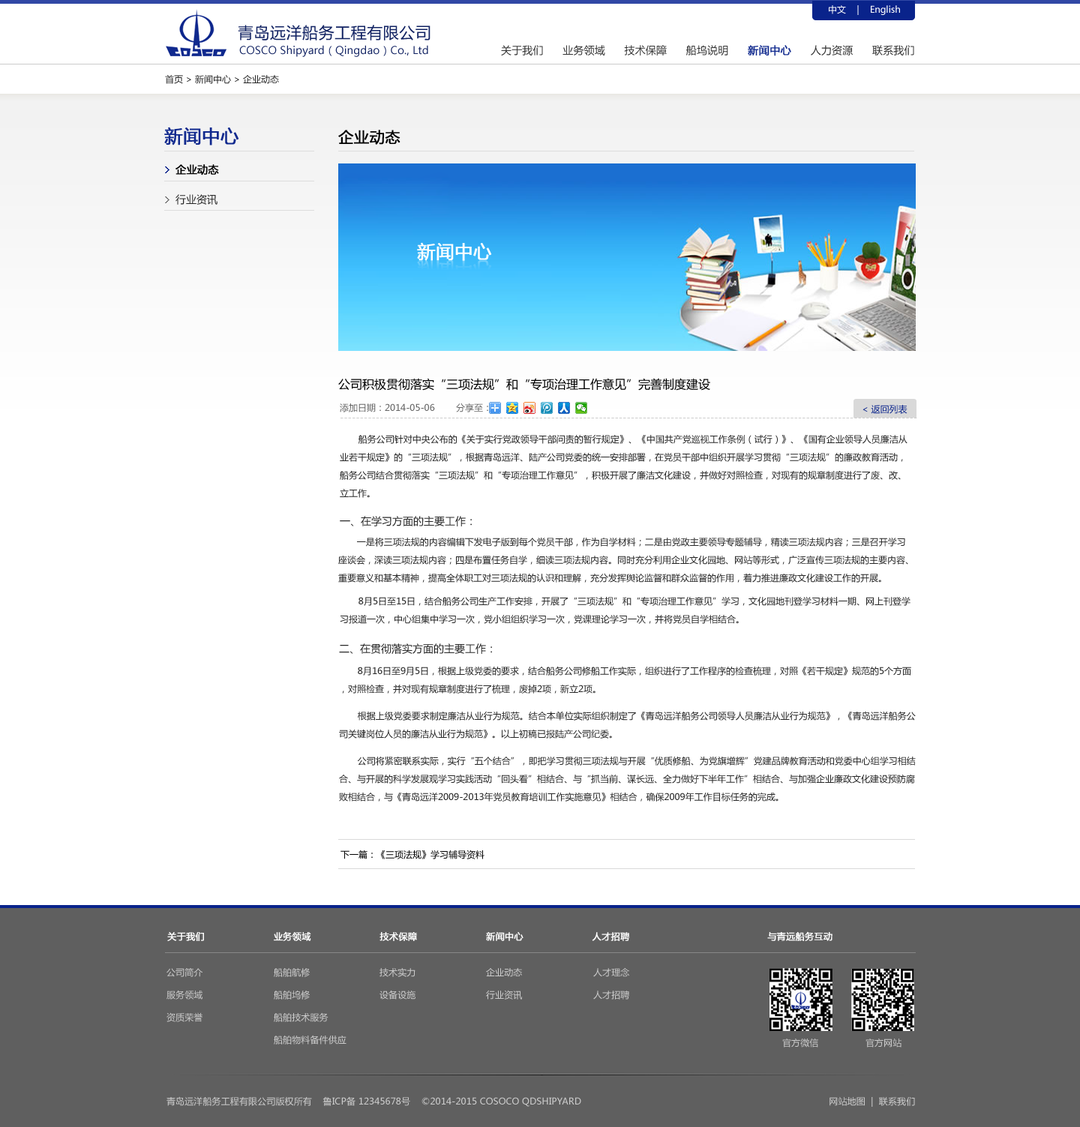
<style>
.page{position:relative;width:1080px;height:1127px;background:#ffffff}
.page>*{position:absolute;margin:0}
.t1{font:9px "MicrosoftYaHei";color:#ffffff}
.t2{font:15.8px "MicrosoftYaHei";letter-spacing:0.025em;color:#112262;text-transform:uppercase}
.t3{font:10.5px "MicrosoftYaHei";letter-spacing:0.01em;color:#112262}
.t4{font:10.5px "MicrosoftYaHei";letter-spacing:0.01em;color:#333333;text-transform:uppercase}
.t5{font:10.5px "MicrosoftYaHei";letter-spacing:0.01em;color:#10298e;text-transform:uppercase;font-weight:bold}
.t6{font:9px "MicrosoftYaHei";color:#272727}
.t7{font:18px "MicrosoftYaHei";letter-spacing:0.01em;color:#10298e;text-transform:uppercase;font-weight:bold}
.t8{font:15px "MicrosoftYaHei";letter-spacing:0.01em;color:#000000;text-transform:uppercase;font-weight:bold}
.t9{font:10.5px/30px "MicrosoftYaHei";color:#000000;font-weight:bold}
.t10{font:10.5px/30px "MicrosoftYaHei";color:#272727}
.t11{font:12px "MicrosoftYaHei";color:#000000}
.t12{font:9px "MicrosoftYaHei";color:#666666}
.t13{font:9px "MicrosoftYaHei";color:#10298e}
.t14{font:9px "MicrosoftYaHei";letter-spacing:0.01em;color:#cccccc;text-transform:uppercase}
.t15{font:9px/18px "MicrosoftYaHei";color:#272727}
.t16{font:10.5px "MicrosoftYaHei";color:#272727}
.t17{font:9px "MicrosoftYaHei";color:#000000}
.t18{font:9px "MicrosoftYaHei";letter-spacing:0.01em;color:#ffffff;text-transform:uppercase;font-weight:bold}
.t19{font:9px/22.5px "MicrosoftYaHei";letter-spacing:0.01em;color:#cccccc;text-transform:uppercase}
</style>
<div class="page">
<p class="t1" style="left:829px;top:5px;width:71px;height:10px">中文    |    English</p>
<p class="t2" style="left:238px;top:25px;width:192px;height:15px">青岛远洋船务工程有限公司</p>
<p class="t3" style="left:239px;top:45px;width:189px;height:12px">COSCO Shipyard（Qingdao）Co., Ltd</p>
<p class="t4" style="left:501px;top:45px;width:413px;height:11px">关于我们      业务领域      技术保障      船坞说明      <span class="t5">新闻中心</span>      人力资源      联系我们</p>
<p class="t6" style="left:165px;top:75px;width:114px;height:9px">首页 &gt; 新闻中心 &gt; 企业动态</p>
<p class="t7" style="left:164px;top:127px;width:75px;height:19px">新闻中心</p>
<p class="t8" style="left:338px;top:130px;width:62px;height:15px">企业动态</p>
<p class="t9" style="left:176px;top:164px;width:43px;height:41px">企业动态<br><span class="t10">行业资讯</span></p>
<p class="t11" style="left:338px;top:378px;width:372px;height:13px">公司积极贯彻落实“三项法规”和“专项治理工作意见”完善制度建设</p>
<p class="t12" style="left:340px;top:403px;width:148px;height:9px">添加日期：2014-05-06        分享至：</p>
<p class="t13" style="left:862px;top:405px;width:46px;height:9px">&lt; 返回列表</p>
<p class="t14" style="left:340px;top:418px;width:577px;height:0px">-------------------------------------------------------------------------------------------------------------------------------------------------</p>
<p class="t15" style="left:340px;top:434px;width:568px;height:64px">船务公司针对中央公布的《关于实行党政领导干部问责的暂行规定》、《中国共产党巡视工作条例（试行）》、《国有企业领导人员廉洁从<br>业若干规定》的“三项法规”，根据青岛远洋、陆产公司党委的统一安排部署，在党员干部中组织开展学习贯彻“三项法规”的廉政教育活动，<br>船务公司结合贯彻落实“三项法规”和“专项治理工作意见”，积极开展了廉洁文化建设，并做好对照检查，对现有的规章制度进行了废、改、<br>立工作。</p>
<p class="t16" style="left:340px;top:516px;width:132px;height:10px">一、在学习方面的主要工作：</p>
<p class="t15" style="left:338px;top:538px;width:570px;height:45px">一是将三项法规的内容编辑下发电子版到每个党员干部，作为自学材料；二是由党政主要领导专题辅导，精读三项法规内容；三是召开学习<br>座谈会，深读三项法规内容；四是布置任务自学，细读三项法规内容。同时充分利用企业文化园地、网站等形式，广泛宣传三项法规的主要内容、<br>重要意义和基本精神，提高全体职工对三项法规的认识和理解，充分发挥舆论监督和群众监督的作用，着力推进廉政文化建设工作的开展。</p>
<p class="t15" style="left:340px;top:596px;width:570px;height:28px">8月5日至15日，结合船务公司生产工作安排，开展了“三项法规”和“专项治理工作意见”学习，文化园地刊登学习材料一期、网上刊登学<br>习报道一次，中心组集中学习一次，党小组组织学习一次，党课理论学习一次，并将党员自学相结合。</p>
<p class="t16" style="left:339px;top:644px;width:153px;height:10px">二、在贯彻落实方面的主要工作：</p>
<p class="t15" style="left:342px;top:666px;width:569px;height:28px">8月16日至9月5日，根据上级党委的要求，结合船务公司修船工作实际，组织进行了工作程序的检查梳理，对照《若干规定》规范的5个方面<br>，对照检查，并对现有规章制度进行了梳理，废掉2项，新立2项。</p>
<p class="t15" style="left:339px;top:711px;width:577px;height:28px">根据上级党委要求制定廉洁从业行为规范。结合本单位实际组织制定了《青岛远洋船务公司领导人员廉洁从业行为规范》，《青岛远洋船务公<br>司关键岗位人员的廉洁从业行为规范》。以上初稿已报陆产公司纪委。</p>
<p class="t15" style="left:339px;top:756px;width:577px;height:46px">公司将紧密联系实际，实行“五个结合”，即把学习贯彻三项法规与开展“优质修船、为党旗增辉”党建品牌教育活动和党委中心组学习相结<br>合、与开展的科学发展观学习实践活动“回头看”相结合、与“抓当前、谋长远、全力做好下半年工作”相结合、与加强企业廉政文化建设预防腐<br>败相结合，与《青岛远洋2009-2013年党员教育培训工作实施意见》相结合，确保2009年工作目标任务的完成。</p>
<p class="t17" style="left:340px;top:850px;width:144px;height:10px">下一篇：《三项法规》学习辅导资料</p>
<p class="t18" style="left:167px;top:932px;width:665px;height:9px">关于我们                       业务领域                       技术保障                       新闻中心                       人才招聘                                              与青远船务互动</p>
<p class="t19" style="left:166px;top:968px;width:36px;height:54px">公司简介<br>服务领域<br>资质荣誉</p>
<p class="t19" style="left:274px;top:968px;width:72px;height:77px">船舶航修<br>船舶坞修<br>船舶技术服务<br>船舶物料备件供应</p>
<p class="t19" style="left:380px;top:968px;width:36px;height:32px">技术实力<br>设备设施</p>
<p class="t19" style="left:486px;top:968px;width:37px;height:32px">企业动态<br>行业资讯</p>
<p class="t19" style="left:593px;top:968px;width:36px;height:32px">人才理念<br>人才招聘</p>
<p class="t14" style="left:782px;top:1039px;width:120px;height:9px">官方微信                 官方网站</p>
<p class="t14" style="left:166px;top:1096px;width:749px;height:11px">青岛远洋船务工程有限公司版权所有    鲁ICP备 12345678号    ©2014-2015 COSOCO QDSHIPYARD                                                                                          网站地图  |  联系我们</p>
</div>
